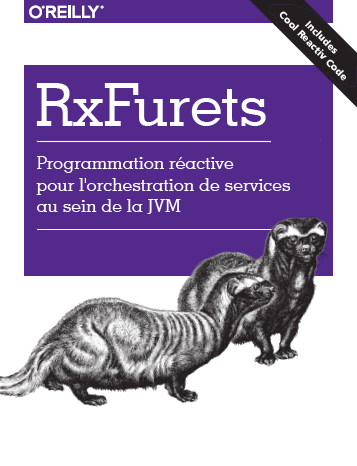
<style>
.page{position:relative;width:357px;height:466px;background:#ffffff}
.page>*{position:absolute;margin:0}
.t1{font:10px "Humanist777BT-BlackB";color:#ffffff}
.t2{font:60px "GeometricSlab703BT-Medium";color:#ffffff}
.t3{font:18px "GeometricSlab703BT-Medium";color:#ffffff}
</style>
<div class="page">
<p class="t1" style="left:279px;top:11px;width:67px;height:70px;text-align:center;rotate:45deg">Includes<br>Cool Reactiv Code</p>
<p class="t2" style="left:36px;top:83px;width:230px;height:43px">RxFurets</p>
<p class="t3" style="left:36px;top:156px;width:255px;height:58px">Programmation réactive<br>pour l'orchestration de services<br>au sein de la JVM</p>
</div>
